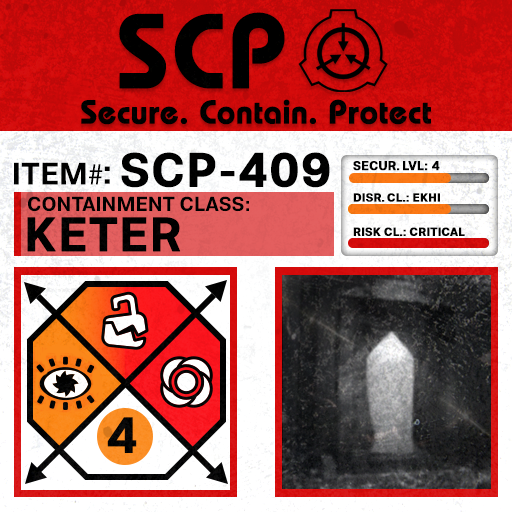
<style>
.page{position:relative;width:512px;height:512px}
.page>*{position:absolute;margin:0}
.t1{font:105.8px "BauhausLT-Demi";color:#000000;font-weight:bold}
.t2{font:33px "BauhausLT-Demi";color:#000000;font-weight:bold}
.t3{font:47.6px "Molde-Semibold";color:#000000;font-weight:bold}
.t4{font:12.5px "Molde-Semibold";color:#000000;font-weight:bold}
.t5{font:31.1px "Molde-Semibold";color:#000000}
.t6{font:31.1px "MyriadPro-Regular";color:#000000}
.t7{font:34.5px "Molde-Semibold";color:#000000}
.t8{font:20.3px "Molde-Semibold";color:#000000}
.t9{font:11.7px "Molde-Semibold";color:#000000;font-weight:bold}
.t10{font:47.8px "Molde-Semibold";color:#000000;font-weight:bold}
</style>
<div class="page">
<p class="t1" style="left:119px;top:12px;width:166px;height:77px">SCP</p>
<p class="t2" style="left:81px;top:99px;width:350px;height:26px">Secure. Contain. Protect</p>
<p class="t3" style="left:121px;top:152px;width:209px;height:36px">SCP-409</p>
<p class="t4" style="left:353px;top:161px;width:87px;height:10px">SECUR. LVL: 4</p>
<p class="t5" style="left:14px;top:162px;width:89px;height:23px">ITEM<span class="t6">#</span></p>
<p class="t7" style="left:104px;top:166px;width:6px;height:18px">:</p>
<p class="t8" style="left:28px;top:196px;width:221px;height:16px">CONTAINMENT CLASS:</p>
<p class="t9" style="left:353px;top:193px;width:87px;height:9px">DISR. CL.: EKHI</p>
<p class="t10" style="left:27px;top:217px;width:154px;height:35px">KETER</p>
<p class="t9" style="left:353px;top:227px;width:112px;height:9px">RISK CL.: CRITICAL</p>
</div>
